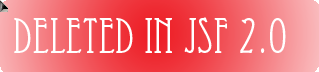
<style>
.page{position:relative;width:319px;height:72px}
.page>*{position:absolute;margin:0}
.t1{font:48px "Eccentric";color:#ffffff}
</style>
<div class="page">
<p class="t1" style="left:14px;top:17px;width:272px;height:37px">deleted in JSF 2.0</p>
</div>
